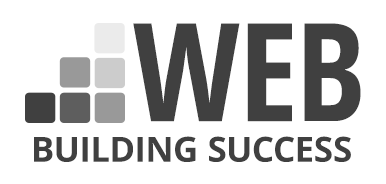
<style>
.page{position:relative;width:386px;height:184px;background:#ffffff}
.page>*{position:absolute;margin:0}
.t1{font:136.5px "OpenSans-CondensedBold";color:#404040;text-transform:uppercase}
.t2{font:34.8px "OpenSans-Bold";color:#404040;text-transform:uppercase}
</style>
<div class="page">
<p class="t1" style="left:133px;top:23px;width:228px;height:99px">web</p>
<p class="t2" style="left:34px;top:136px;width:317px;height:26px">Building Success</p>
</div>
